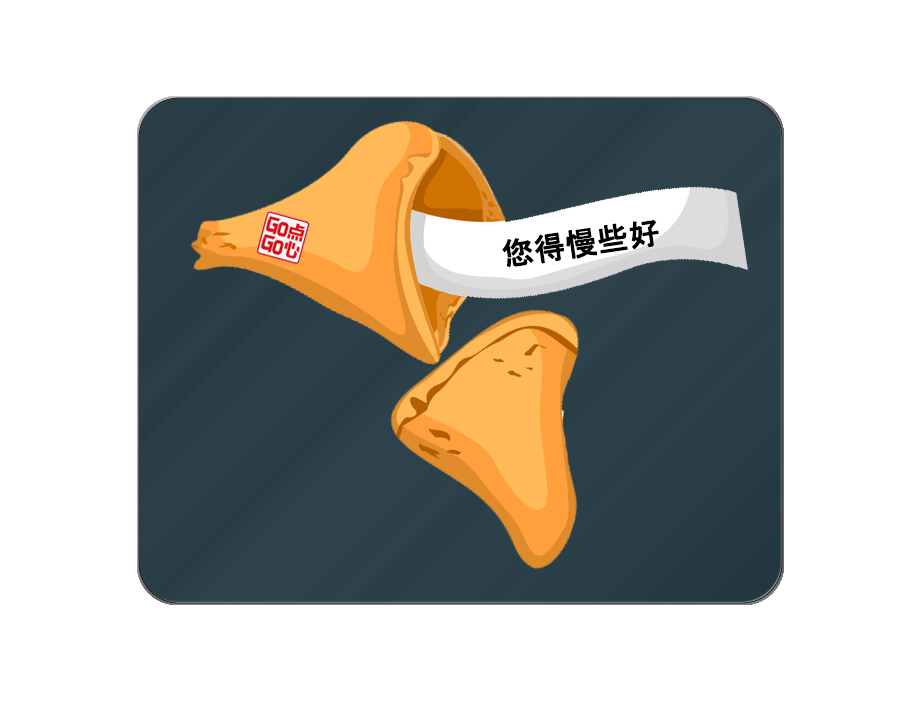
<style>
.page{position:relative;width:916px;height:720px;background:#ffffff}
.page>*{position:absolute;margin:0}
.t1{font:31.1px "MS-Gothic";color:#000000;font-weight:bold}
.t2{font:31.1px "ErasITC-Bold";color:#000000;font-weight:bold}
</style>
<div class="page">
<p class="t1" style="left:502px;top:219px;width:157px;height:48px;rotate:-8deg"><span class="t2"> </span>您得慢些好</p>
</div>
